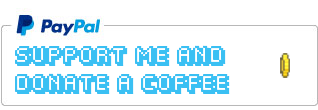
<style>
.page{position:relative;width:318px;height:110px;background:#ffffff}
.page>*{position:absolute;margin:0}
.t1{font:16px/28px "Fipps-Regular";color:#3ac0f3;text-transform:uppercase}
</style>
<div class="page">
<p class="t1" style="left:15px;top:45px;width:215px;height:49px">Support Me and<br>Donate A CoFfee</p>
</div>
